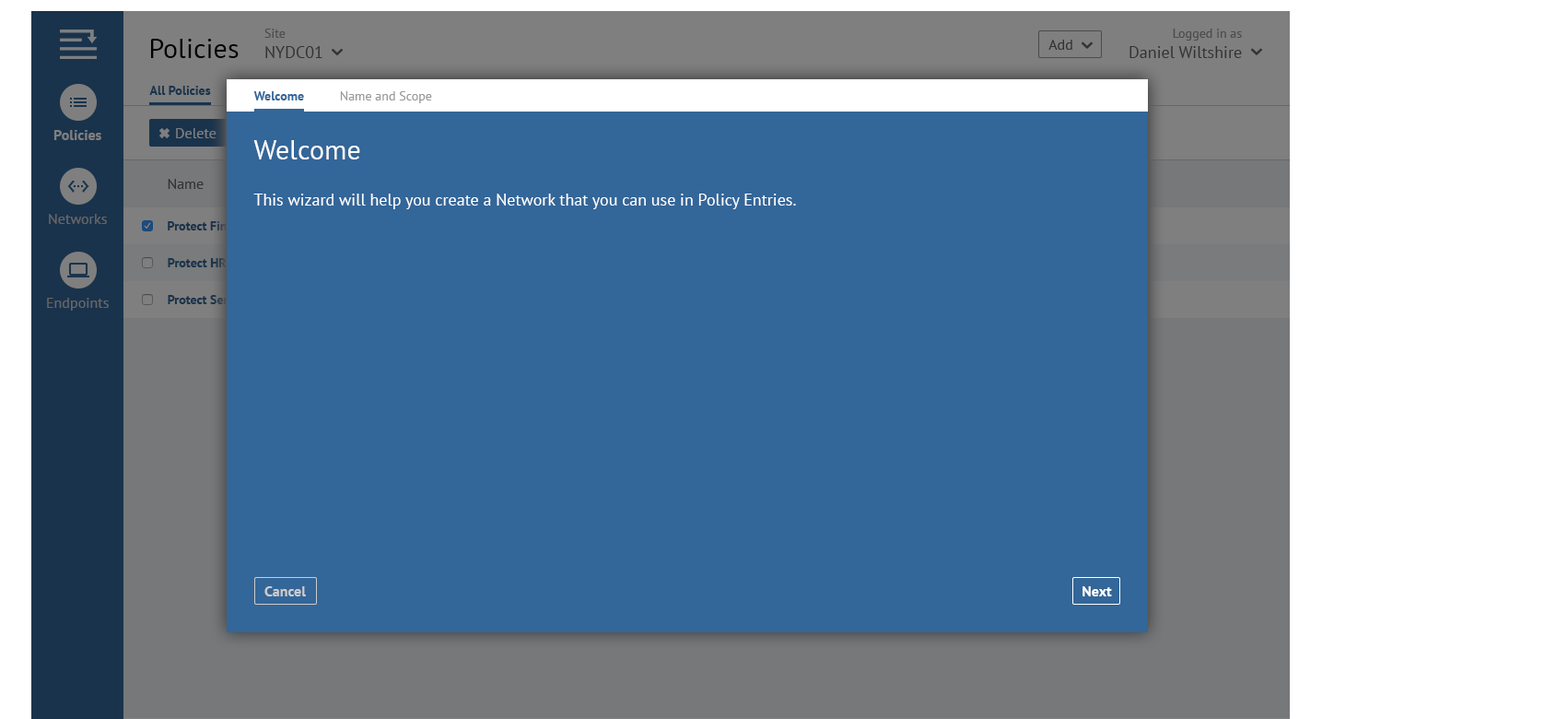
<style>
.page{position:relative;width:1568px;height:719px;background:#336699}
.page>*{position:absolute;margin:0}
.t1{font:16.6px "PTSans-Regular"}
.t2{font:12.9px "PTSans-Regular"}
.t3{font:16.8px "PTSans-Regular"}
.t4{font:13.1px "PTSans-Regular"}
.t5{font:27.6px "PTSans-Regular";color:#000000}
.t6{font:14.7px "PTSans-Regular";color:#333333}
.t7{font:12.8px "PTSans-Bold";color:#19334c}
.t8{font:12.8px "PTSans-Bold";color:#336699}
.t9{font:12.8px "PTSans-Regular";color:#999999}
.t10{font:14.7px "PTSans-Bold";color:#7f7f7f}
.t11{font:14.7px "PTSans-Regular";color:#7f7f7f}
.t12{font:27.6px "PTSans-Regular";color:#ffffff}
.t13{font:16.6px "PTSans-Regular";color:#ffffff}
.t14{font:14.7px "PTSans-Regular";color:#666666}
.t15{font:12.9px "PTSans-Bold"}
.t16{font:12.9px "PTSans-Bold";color:#19334c}
.t17{font:14.7px "PTSans-Bold";color:#cccccc}
.t18{font:14.7px "PTSans-Bold";color:#ffffff}
</style>
<div class="page">
<p class="t1" style="left:264px;top:29px;width:58px;height:29px"><span class="t2">Site<br></span>NYDC01</p>
<p class="t3" style="left:1129px;top:29px;width:113px;height:29px;text-align:right"><span class="t4">Logged in as<br></span>Daniel Wiltshire</p>
<p class="t5" style="left:151px;top:39px;width:88px;height:19px">Policies</p>
<p class="t6" style="left:1048px;top:40px;width:24px;height:10px">Add</p>
<p class="t7" style="left:149px;top:86px;width:62px;height:9px">All Policies</p>
<p class="t8" style="left:253px;top:91px;width:51px;height:9px">Welcome</p>
<p class="t9" style="left:340px;top:91px;width:92px;height:12px">Name and Scope</p>
<p class="t10" style="left:53px;top:130px;width:48px;height:10px">Policies</p>
<p class="t11" style="left:176px;top:128px;width:40px;height:10px">Delete</p>
<p class="t12" style="left:253px;top:140px;width:107px;height:19px">Welcome</p>
<p class="t6" style="left:168px;top:179px;width:36px;height:10px">Name</p>
<p class="t13" style="left:253px;top:193px;width:543px;height:16px">This wizard will help you create a Network that you can use in Policy Entries.</p>
<p class="t14" style="left:49px;top:214px;width:58px;height:10px">Networks</p>
<p class="t15" style="left:168px;top:221px;width:84px;height:9px">Protect Finance</p>
<p class="t16" style="left:168px;top:258px;width:59px;height:9px">Protect HR</p>
<p class="t14" style="left:47px;top:298px;width:62px;height:12px">Endpoints</p>
<p class="t15" style="left:168px;top:295px;width:83px;height:9px">Protect Servers</p>
<p class="t17" style="left:264px;top:586px;width:42px;height:10px">Cancel</p>
<p class="t18" style="left:1082px;top:586px;width:30px;height:10px">Next</p>
</div>
